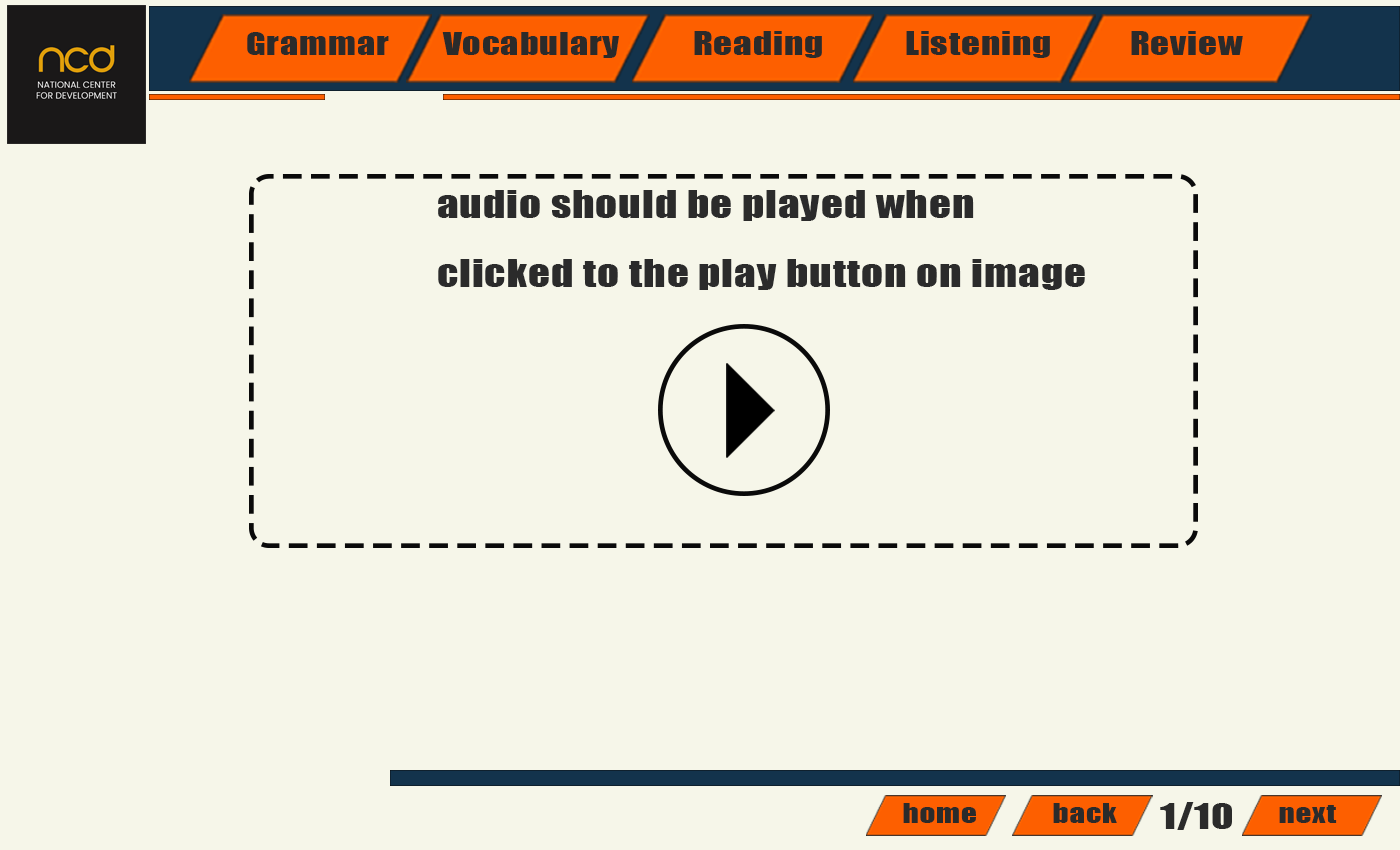
<style>
.page{position:relative;width:1400px;height:850px;background:#f6f6e9}
.page>*{position:absolute;margin:0}
.t1{font:29.2px "Impact";letter-spacing:0.02em;color:#2b2b2b;scale:1.25 1}
.t2{font:29.9px "Impact";letter-spacing:0.02em;color:#2b2b2b;scale:1.25 1}
.t3{font:34.7px/69.4px "Impact";letter-spacing:0.02em;color:#2b2b2b;scale:1.25 1}
.t4{font:25px "Impact";letter-spacing:0.02em;color:#2b2b2b;scale:1.25 1}
.t5{font:33.3px "Impact";letter-spacing:0.02em;color:#2b2b2b;scale:1.25 1}
</style>
<div class="page">
<p class="t1" style="left:247px;top:32px;width:142px;height:23px">Grammar</p>
<p class="t1" style="left:442px;top:32px;width:177px;height:26px">Vocabulary</p>
<p class="t2" style="left:694px;top:31px;width:128px;height:27px">Reading</p>
<p class="t2" style="left:906px;top:31px;width:144px;height:27px">Listening</p>
<p class="t2" style="left:1131px;top:31px;width:112px;height:24px">Review</p>
<p class="t3" style="left:438px;top:190px;width:647px;height:100px">audio should be played when clicked to the play button on image<br>                    HERE</p>
<p class="t4" style="left:903px;top:803px;width:73px;height:20px">home</p>
<p class="t4" style="left:1053px;top:803px;width:64px;height:20px">back</p>
<p class="t5" style="left:1160px;top:802px;width:72px;height:28px">1/10</p>
<p class="t4" style="left:1279px;top:805px;width:58px;height:18px">next</p>
</div>
